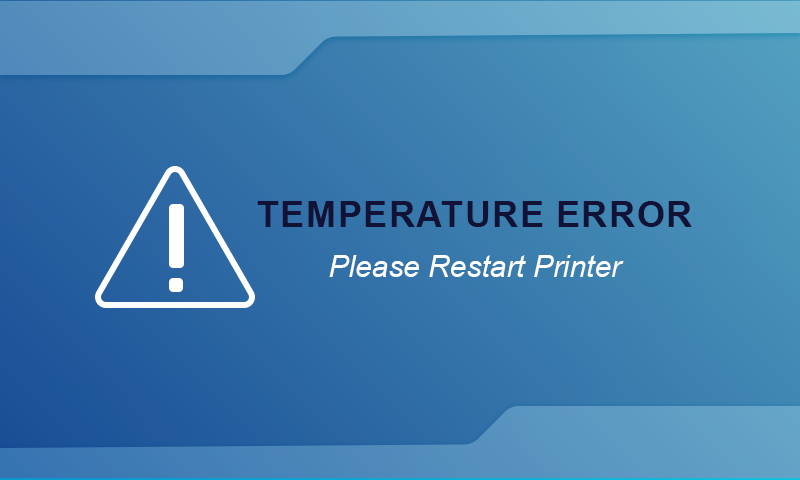
<style>
.page{position:relative;width:800px;height:480px}
.page>*{position:absolute;margin:0}
.t1{font:29.9px/50px "Arial-ItalicMT";color:#ffffff}
.t2{font:36.5px/50px "Arial-BoldMT";color:#111236;text-transform:uppercase}
</style>
<div class="page">
<p class="t1" style="left:257px;top:201px;width:435px;height:76px;text-align:center"><span class="t2">temperature error<br></span>Please Restart Printer</p>
</div>
